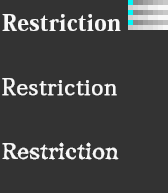
<style>
.page{position:relative;width:168px;height:193px;background:#333333}
.page>*{position:absolute;margin:0}
.t1{font:22px/64px "KozMinPro-Heavy";letter-spacing:0.022em;color:#f8f8f8}
.t2{font:22px/64px "AdobeFangsongStd-Regular";letter-spacing:0.028em;color:#f8f8f8;font-weight:bold}
.t3{font:22px/64px "ComicMysteryStd-DB";letter-spacing:-0.006em;color:#f8f8f8}
</style>
<div class="page">
<p class="t1" style="left:2px;top:14px;width:119px;height:146px">Restriction<br><span class="t2">Restriction<br></span><span class="t3">Restriction</span></p>
</div>
